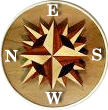
<style>
.page{position:relative;width:108px;height:110px;background:#ffffff}
.page>*{position:absolute;margin:0}
.t1{font:16px "CenturySchoolbook-Bold";color:#ffffff}
</style>
<div class="page">
<p class="t1" style="left:47px;top:4px;width:11px;height:12px">E</p>
<p class="t1" style="left:5px;top:50px;width:13px;height:12px">N</p>
<p class="t1" style="left:92px;top:48px;width:10px;height:13px">S</p>
<p class="t1" style="left:45px;top:92px;width:18px;height:12px">W</p>
</div>
